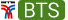
<style>
.page{position:relative;width:68px;height:20px;background:#4a831e}
.page>*{position:absolute;margin:0}
.t1{font:20px "Roboto-Light";letter-spacing:0.01em;color:#ffffff}
</style>
<div class="page">
<p class="t1" style="left:25px;top:2px;width:34px;height:16px">BTS</p>
</div>
